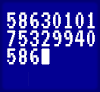
<style>
.page{position:relative;width:100px;height:92px;background:#030092}
.page>*{position:absolute;margin:0}
.t1{font:27px/18px "VT323-Regular";letter-spacing:0.005em;color:#ffffff}
</style>
<div class="page">
<p class="t1" style="left:7px;top:12px;width:88px;height:53px">58630101<br>75329940<br>586</p>
</div>
